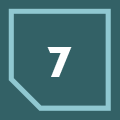
<style>
.page{position:relative;width:120px;height:120px;background:#336166}
.page>*{position:absolute;margin:0}
.t1{font:48px "TransformersMovie";color:#ffffff}
</style>
<div class="page">
<p class="t1" style="left:47px;top:47px;width:25px;height:30px">7</p>
</div>
